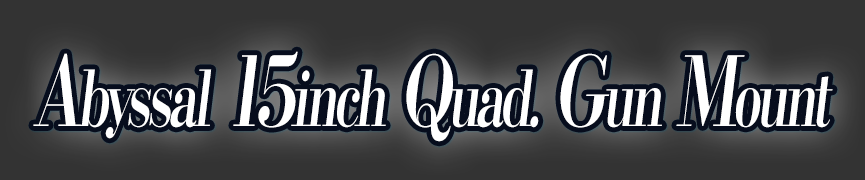
<style>
.page{position:relative;width:865px;height:180px;background:#333333}
.page>*{position:absolute;margin:0}
.t1{font:76.8px "KochoStd-Heavy";letter-spacing:-0.08em;color:#ffffff;font-style:italic;scale:0.68 1}
.t2{font:96px "KochoStd-Heavy";letter-spacing:-0.08em;color:#ffffff;font-style:italic;scale:0.68 1}
</style>
<div class="page">
<p class="t1" style="left:33px;top:51px;width:800px;height:91px"><span class="t2">A</span>byssal<span class="t2"> 15</span>inch<span class="t2"> Q</span>uad.<span class="t2"> G</span>un<span class="t2"> M</span>ount</p>
</div>
